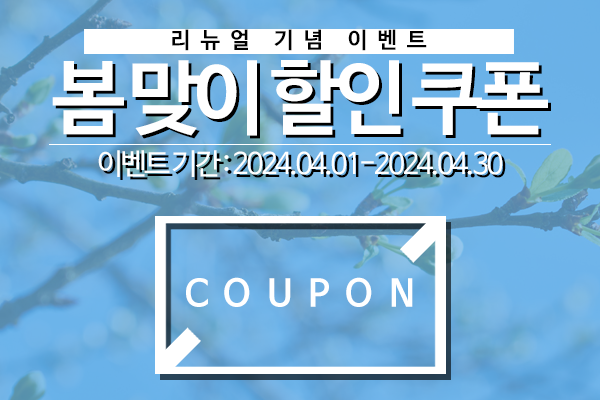
<style>
.page{position:relative;width:600px;height:400px}
.page>*{position:absolute;margin:0}
.t1{font:22.2px "NanumBarunGothicBold";letter-spacing:0.43em;color:#000000}
.t2{font:29.2px/49.7px "NanumBarunGothic";letter-spacing:-0.09em;color:#ffffff}
.t3{font:81.2px/63.9px "NanumBarunGothicBold";letter-spacing:-0.09em;color:#ffffff}
.t4{font:29.2px/49.7px "NanumBarunGothic";letter-spacing:-0.09em}
.t5{font:81.2px/63.9px "NanumBarunGothicBold";letter-spacing:-0.09em}
.t6{font:36.7px "NanumBarunGothicBold";letter-spacing:0.43em;color:#ffffff}
</style>
<div class="page">
<p class="t1" style="left:172px;top:29px;width:255px;height:22px">리뉴얼 기념 이벤트</p>
<p class="t2" style="left:52px;top:60px;width:496px;height:117px;text-align:center"><span class="t3">봄 맞이 할인 쿠폰<br></span>이벤트 기간 : 2024.04.01-2024.04.30</p>
<p class="t4" style="left:55px;top:63px;width:496px;height:117px;text-align:center"><span class="t5">봄 맞이 할인 쿠폰<br></span>이벤트 기간 : 2024.04.01-2024.04.30</p>
<p class="t6" style="left:186px;top:277px;width:227px;height:30px">COUPON</p>
</div>
